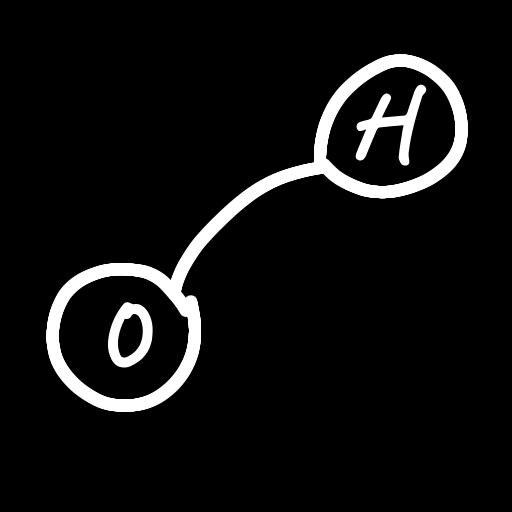
<style>
.page{position:relative;width:512px;height:512px;background:#000000}
.page>*{position:absolute;margin:0}
.t1{font:103px "OnlyYouRegular";color:#ffffff}
</style>
<div class="page">
<p class="t1" style="left:355px;top:84px;width:73px;height:82px">H</p>
<p class="t1" style="left:107px;top:301px;width:47px;height:69px;rotate:4deg">O</p>
</div>
